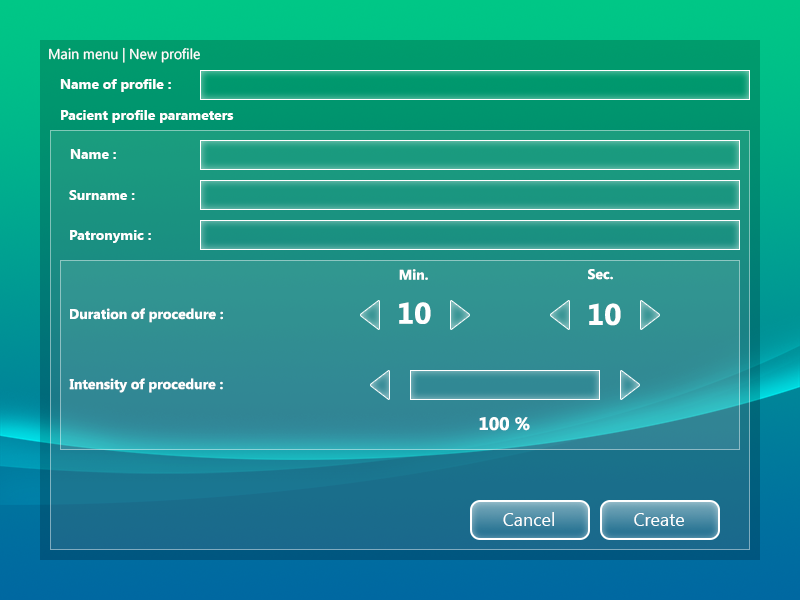
<style>
.page{position:relative;width:800px;height:600px}
.page>*{position:absolute;margin:0}
.t1{font:14.2px "SegoeUI";color:#ffffff}
.t2{font:14px "SegoeUI-Bold";color:#ffffff}
.t3{font:29.7px "SegoeUI-Bold";color:#ffffff}
.t4{font:18px "SegoeUI-Bold";color:#ffffff}
.t5{font:18px "SegoeUI";color:#ffffff}
</style>
<div class="page">
<p class="t1" style="left:49px;top:47px;width:151px;height:16px">Main menu | New profile</p>
<p class="t2" style="left:60px;top:79px;width:111px;height:13px">Name of profile :</p>
<p class="t2" style="left:61px;top:110px;width:173px;height:13px">Pacient profile parameters</p>
<p class="t2" style="left:70px;top:149px;width:46px;height:10px">Name :</p>
<p class="t2" style="left:69px;top:190px;width:66px;height:10px">Surname :</p>
<p class="t2" style="left:70px;top:230px;width:81px;height:13px">Patronymic :</p>
<p class="t2" style="left:399px;top:269px;width:29px;height:11px">Min.</p>
<p class="t2" style="left:588px;top:269px;width:25px;height:11px">Sec.</p>
<p class="t3" style="left:399px;top:302px;width:32px;height:22px">10</p>
<p class="t3" style="left:589px;top:303px;width:32px;height:23px">10</p>
<p class="t2" style="left:70px;top:308px;width:153px;height:15px">Duration of procedure :</p>
<p class="t2" style="left:69px;top:378px;width:154px;height:15px">Intensity of procedure :</p>
<p class="t4" style="left:479px;top:417px;width:51px;height:14px">100 %</p>
<p class="t5" style="left:503px;top:512px;width:51px;height:14px">Cancel</p>
<p class="t5" style="left:634px;top:513px;width:50px;height:13px">Create</p>
</div>
